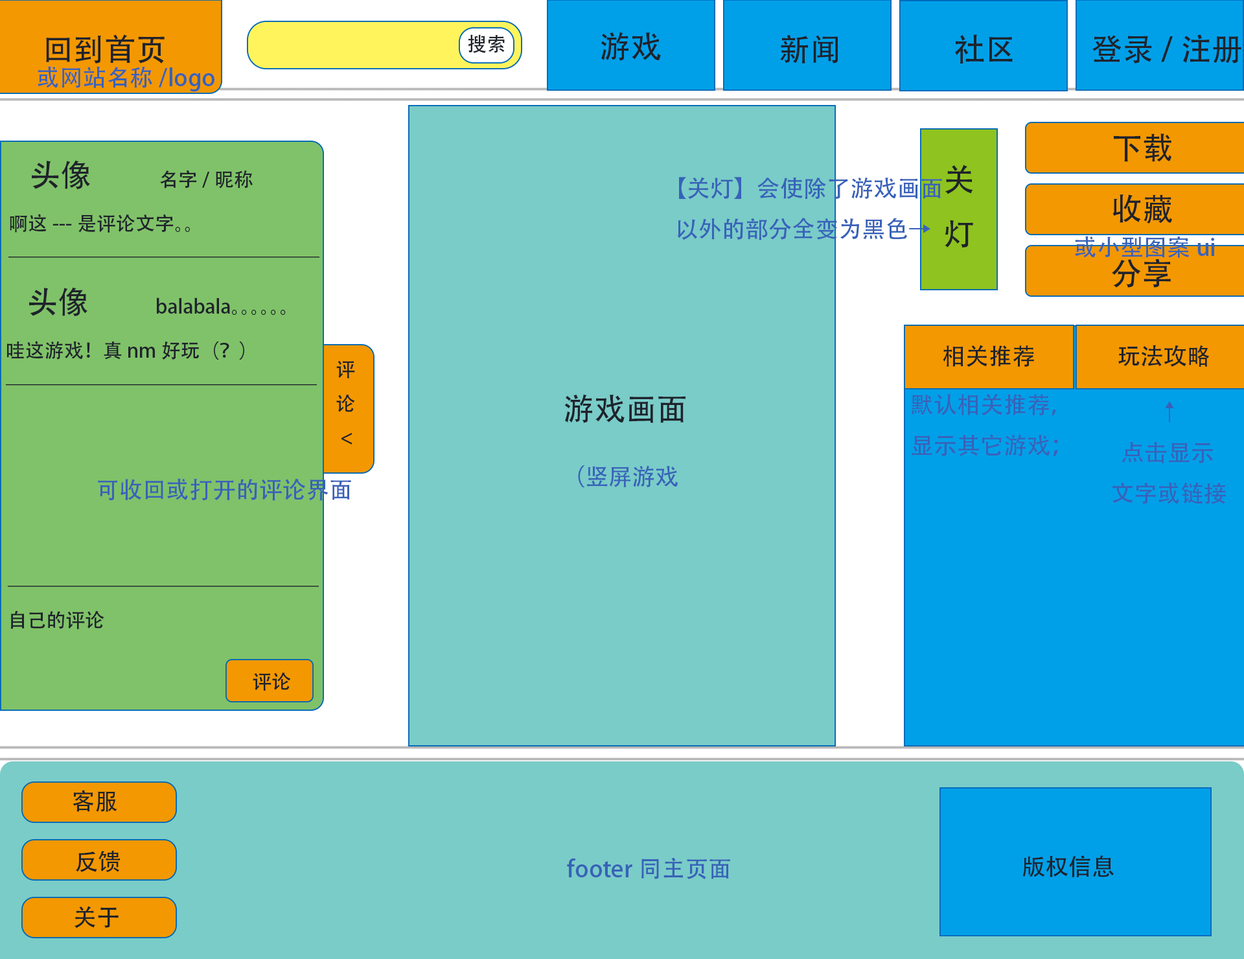
<style>
.page{position:relative;width:1244px;height:959px;background:#7accc8}
.page>*{position:absolute;margin:0}
.t1{font:31.1px "AdobeHeitiStd-Regular";color:#1f232c}
.t2{font:19.4px "AdobeHeitiStd-Regular";color:#1f232c}
.t3{font:23.3px "AdobeHeitiStd-Regular";color:#3862b9}
.t4{font:23.3px "AdobeHeitiStd-Regular";color:#1f232c}
</style>
<div class="page">
<p class="t1" style="left:46px;top:34px;width:119px;height:29px">回到首页</p>
<p class="t2" style="left:468px;top:34px;width:37px;height:19px">搜索</p>
<p class="t1" style="left:601px;top:32px;width:60px;height:29px">游戏</p>
<p class="t1" style="left:780px;top:35px;width:58px;height:28px">新闻</p>
<p class="t1" style="left:955px;top:34px;width:57px;height:29px">社区</p>
<p class="t1" style="left:1092px;top:34px;width:149px;height:29px">登录/注册</p>
<p class="t3" style="left:38px;top:66px;width:176px;height:26px">或网站名称/logo</p>
<p class="t1" style="left:1114px;top:133px;width:57px;height:29px">下载</p>
<p class="t2" style="left:8px;top:160px;width:311px;height:98px"><span class="t1">   头像         </span> 名字/昵称<br>啊这---是评论文字。。<br>————————————————</p>
<p class="t1" style="left:944px;top:165px;width:29px;height:82px">关<br>灯</p>
<p class="t3" style="left:677px;top:177px;width:265px;height:63px">【关灯】会使除了游戏画面<br>以外的部分全变为黑色→</p>
<p class="t1" style="left:1112px;top:194px;width:60px;height:29px">收藏</p>
<p class="t3" style="left:1075px;top:236px;width:139px;height:22px">或小型图案ui</p>
<p class="t1" style="left:1112px;top:258px;width:59px;height:30px">分享</p>
<p class="t2" style="left:6px;top:287px;width:311px;height:98px"><span class="t1">   头像         </span> balabala。。。。。。<br>哇这游戏！真nm好玩（？）<br>————————————————</p>
<p class="t4" style="left:943px;top:345px;width:91px;height:22px">相关推荐</p>
<p class="t4" style="left:1118px;top:345px;width:91px;height:22px">玩法攻略</p>
<p class="t2" style="left:336px;top:361px;width:19px;height:83px">评<br>论<br> &lt;</p>
<p class="t1" style="left:564px;top:394px;width:121px;height:29px">游戏画面</p>
<p class="t3" style="left:911px;top:393px;width:147px;height:63px">默认相关推荐，<br>显示其它游戏；</p>
<p class="t3" style="left:1112px;top:401px;width:114px;height:103px">↑<br>  点击显示<br>文字或链接</p>
<p class="t3" style="left:578px;top:465px;width:100px;height:22px">（竖屏游戏</p>
<p class="t3" style="left:98px;top:478px;width:253px;height:23px">可收回或打开的评论界面</p>
<p class="t2" style="left:8px;top:586px;width:311px;height:43px">————————————————<br>自己的评论</p>
<p class="t2" style="left:253px;top:672px;width:38px;height:19px">评论</p>
<p class="t4" style="left:73px;top:790px;width:44px;height:22px">客服</p>
<p class="t4" style="left:76px;top:850px;width:44px;height:22px">反馈</p>
<p class="t3" style="left:567px;top:857px;width:163px;height:22px">footer同主页面</p>
<p class="t4" style="left:1022px;top:855px;width:92px;height:22px">版权信息</p>
<p class="t4" style="left:74px;top:906px;width:45px;height:22px">关于</p>
</div>
